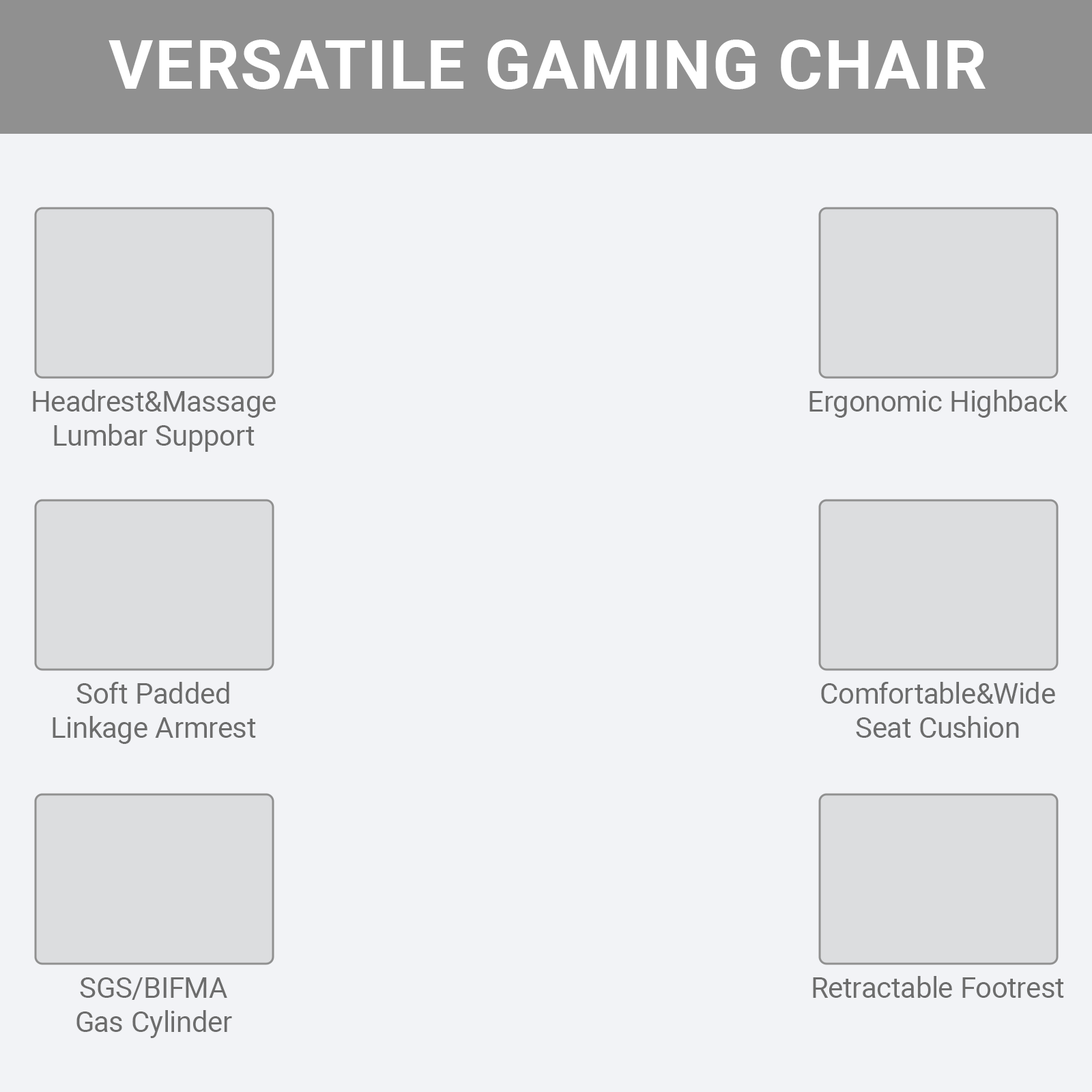
<style>
.page{position:relative;width:1092px;height:1092px;background:#f2f3f6}
.page>*{position:absolute;margin:0}
.t1{font:68.2px "Roboto-Bold";color:#ffffff;text-transform:uppercase}
.t2{font:28.7px "Roboto-Regular";color:#6c6c6c}
</style>
<div class="page">
<p class="t1" style="left:109px;top:40px;width:877px;height:49px">Versatile gaming chair</p>
<p class="t2" style="left:33px;top:390px;width:243px;height:62px;text-align:center">Headrest&amp;Massage<br>Lumbar Support</p>
<p class="t2" style="left:809px;top:390px;width:259px;height:28px">Ergonomic Highback</p>
<p class="t2" style="left:53px;top:682px;width:203px;height:62px;text-align:center">Soft Padded<br>Linkage Armrest</p>
<p class="t2" style="left:821px;top:682px;width:234px;height:56px;text-align:center">Comfortable&amp;Wide<br>Seat Cushion</p>
<p class="t2" style="left:76px;top:977px;width:156px;height:61px;text-align:center">SGS/BIFMA<br>Gas Cylinder</p>
<p class="t2" style="left:813px;top:976px;width:251px;height:22px">Retractable Footrest</p>
</div>
